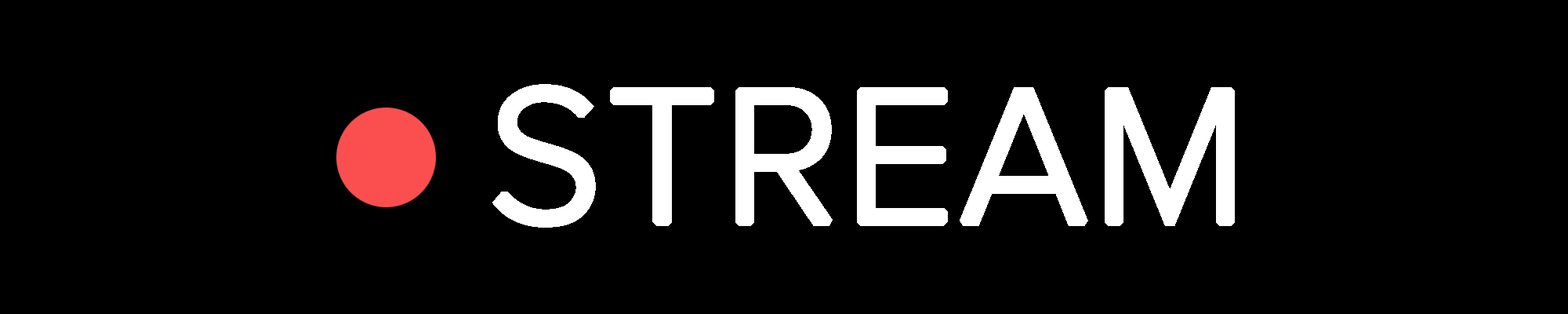
<style>
.page{position:relative;width:1568px;height:314px;background:#000000}
.page>*{position:absolute;margin:0}
.t1{font:196px "ProximaNova-Light";color:#ffffff;font-weight:bold}
</style>
<div class="page">
<p class="t1" style="left:492px;top:84px;width:743px;height:143px">STREAM</p>
</div>
